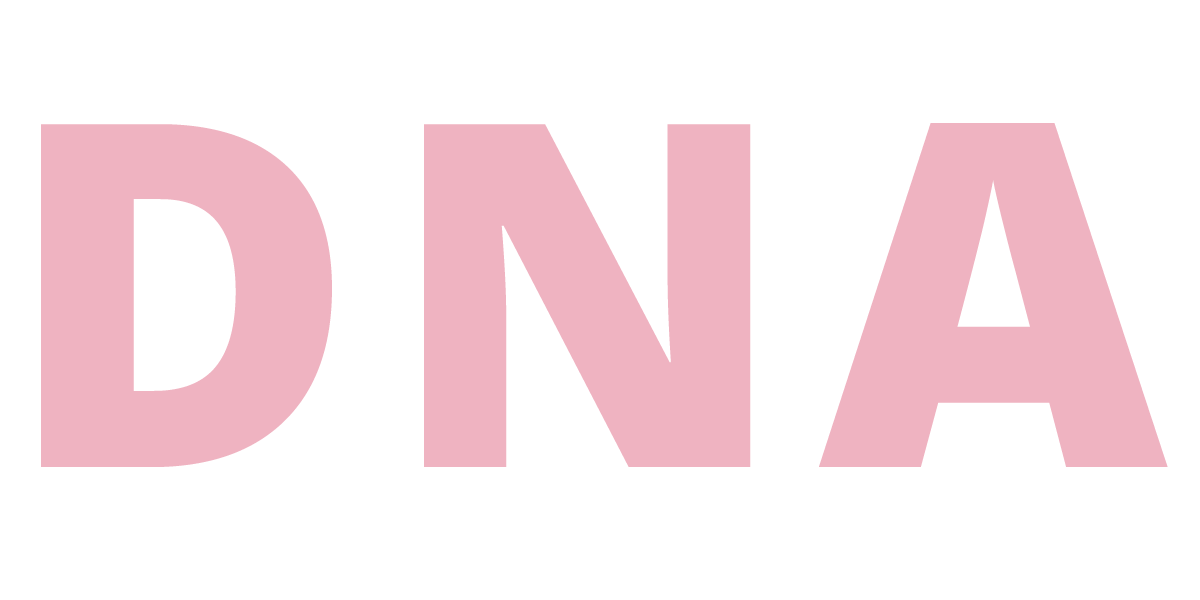
<style>
.page{position:relative;width:1200px;height:600px;background:#ffffff}
.page>*{position:absolute;margin:0}
.t1{font:480px "OpenSans-Extrabold";letter-spacing:0.065em;color:#efb3c1}
</style>
<div class="page">
<p class="t1" style="left:41px;top:123px;width:1127px;height:344px">DNA</p>
</div>
